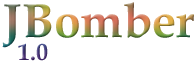
<style>
.page{position:relative;width:196px;height:63px;background:#ffffff}
.page>*{position:absolute;margin:0}
.t1{font:48px "BookAntiqua-Bold"}
.t2{font:24px "BookAntiqua-Bold"}
</style>
<div class="page">
<p class="t1" style="left:2px;top:2px;width:192px;height:46px">JBomber</p>
<p class="t2" style="left:18px;top:43px;width:30px;height:18px">1.0</p>
</div>
